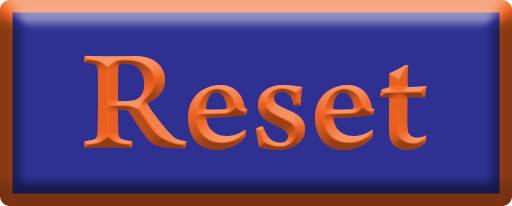
<style>
.page{position:relative;width:512px;height:206px;background:#2e3192}
.page>*{position:absolute;margin:0}
.t1{font:150px "ArnoPro-SmbdCaption"}
</style>
<div class="page">
<p class="t1" style="left:84px;top:55px;width:343px;height:96px">Reset</p>
</div>
